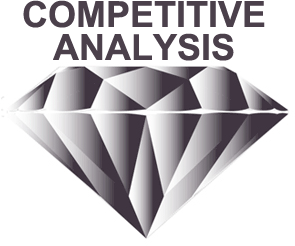
<style>
.page{position:relative;width:295px;height:246px;background:#ffffff}
.page>*{position:absolute;margin:0}
.t1{font:36px "Arial-BoldMT";color:#4b404b}
</style>
<div class="page">
<p class="t1" style="left:23px;top:0px;width:242px;height:28px">COMPETITIVE</p>
<p class="t1" style="left:53px;top:33px;width:181px;height:28px">ANALYSIS</p>
</div>
